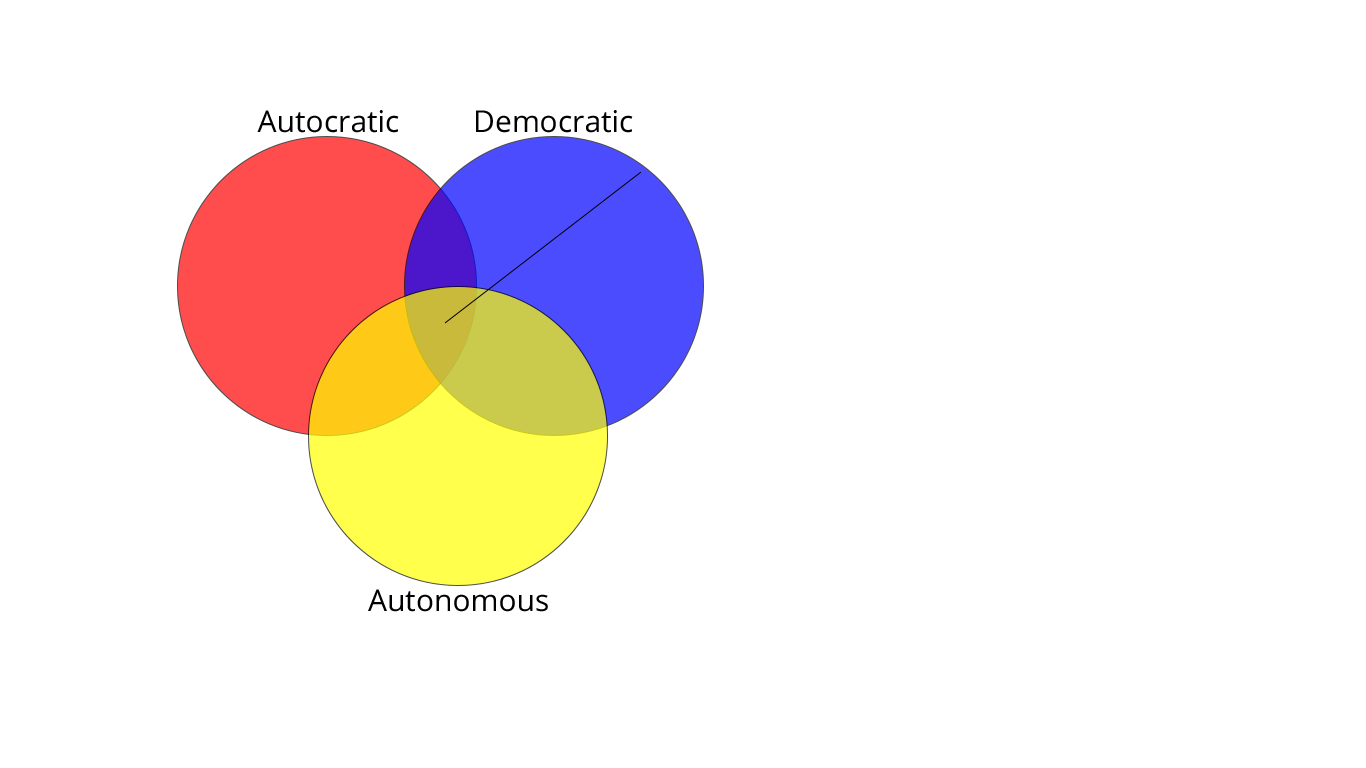
<style>
.page{position:relative;width:1366px;height:768px;background:#ffffff}
.page>*{position:absolute;margin:0}
.t1{font:30px "OpenSans";color:#010101}
.t2{font:30px "OpenSans";color:#000000}
</style>
<div class="page">
<p class="t1" style="left:257px;top:110px;width:142px;height:23px">Autocratic</p>
<p class="t2" style="left:476px;top:110px;width:157px;height:23px">Democratic</p>
<p class="t2" style="left:368px;top:589px;width:180px;height:23px">Autonomous</p>
</div>
